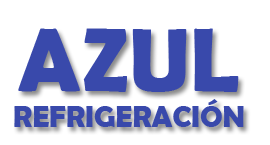
<style>
.page{position:relative;width:270px;height:145px;background:#ffffff}
.page>*{position:absolute;margin:0}
.t1{font:30px "BerlinSansFBDemi-Bold";color:#3949ab}
.t2{font:90px "BerlinSansFBDemi-Bold";color:#3949ab}
</style>
<div class="page">
<p class="t1" style="left:14px;top:28px;width:230px;height:99px;text-align:center"><span class="t2">AZUL<br></span>REFRIGERACIÓN</p>
</div>
